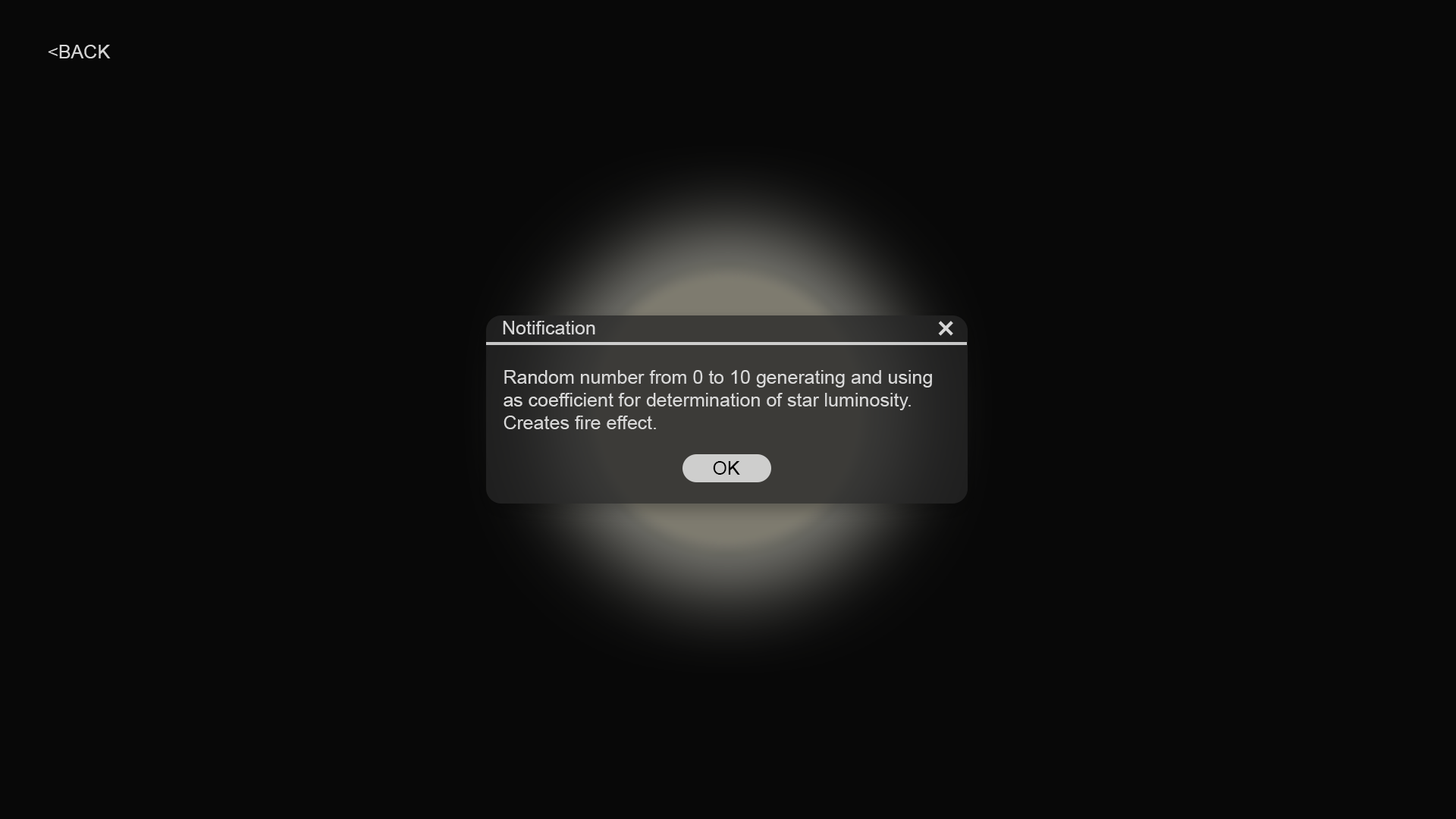
<style>
.page{position:relative;width:1456px;height:819px;background:#080808}
.page>*{position:absolute;margin:0}
.t1{font:19px "ArialMT";color:#d5d5d5}
.t2{font:19px "ArialMT";color:#d7d7d7}
.t3{font:36.8px "ArialMT";color:#d6d6d6}
.t4{font:19px "ArialMT";color:#d9d9d9}
.t5{font:19px "ArialMT";color:#000000}
</style>
<div class="page">
<p class="t1" style="left:48px;top:45px;width:63px;height:13px">&lt;BACK</p>
<p class="t2" style="left:503px;top:321px;width:92px;height:13px">Notification</p>
<p class="t3" style="left:938px;top:321px;width:15px;height:15px;rotate:45deg">+</p>
<p class="t4" style="left:504px;top:370px;width:428px;height:59px">Random number from 0 to 10 generating and using<br>as coefficient for determination of star luminosity. <br>Creates fire effect.</p>
<p class="t5" style="left:713px;top:461px;width:27px;height:14px">OK</p>
</div>
